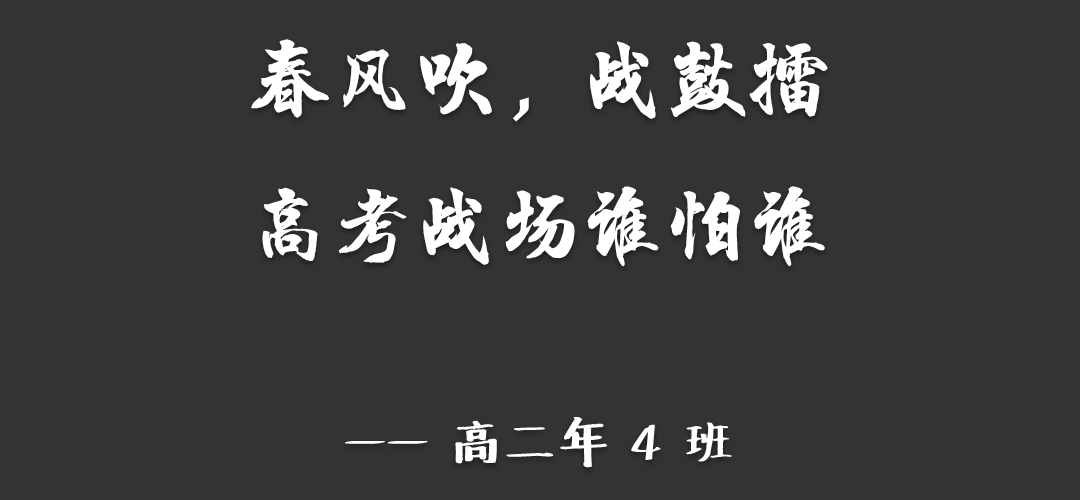
<style>
.page{position:relative;width:1080px;height:500px;background:#333333}
.page>*{position:absolute;margin:0}
.t1{font:83.3px "HYChengXingJ";color:#ffffff}
.t2{font:50px "Undefined";color:#ffffff}
</style>
<div class="page">
<p class="t1" style="left:251px;top:39px;width:577px;height:429px;text-align:center">春风吹，战鼓擂<br>高考战场谁怕谁<br><span class="t2"><br>—— 高二年 4 班</span></p>
</div>
